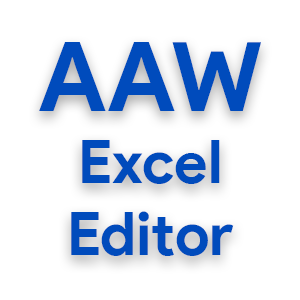
<style>
.page{position:relative;width:300px;height:300px;background:#ffffff}
.page>*{position:absolute;margin:0}
.t1{font:60px "ProductSans-Bold";color:#004bbc}
.t2{font:96px "ProductSans-Bold";color:#004bbc}
</style>
<div class="page">
<p class="t1" style="left:39px;top:42px;width:222px;height:214px;text-align:center"><span class="t2">AAW<br></span>Excel<br>Editor</p>
</div>
